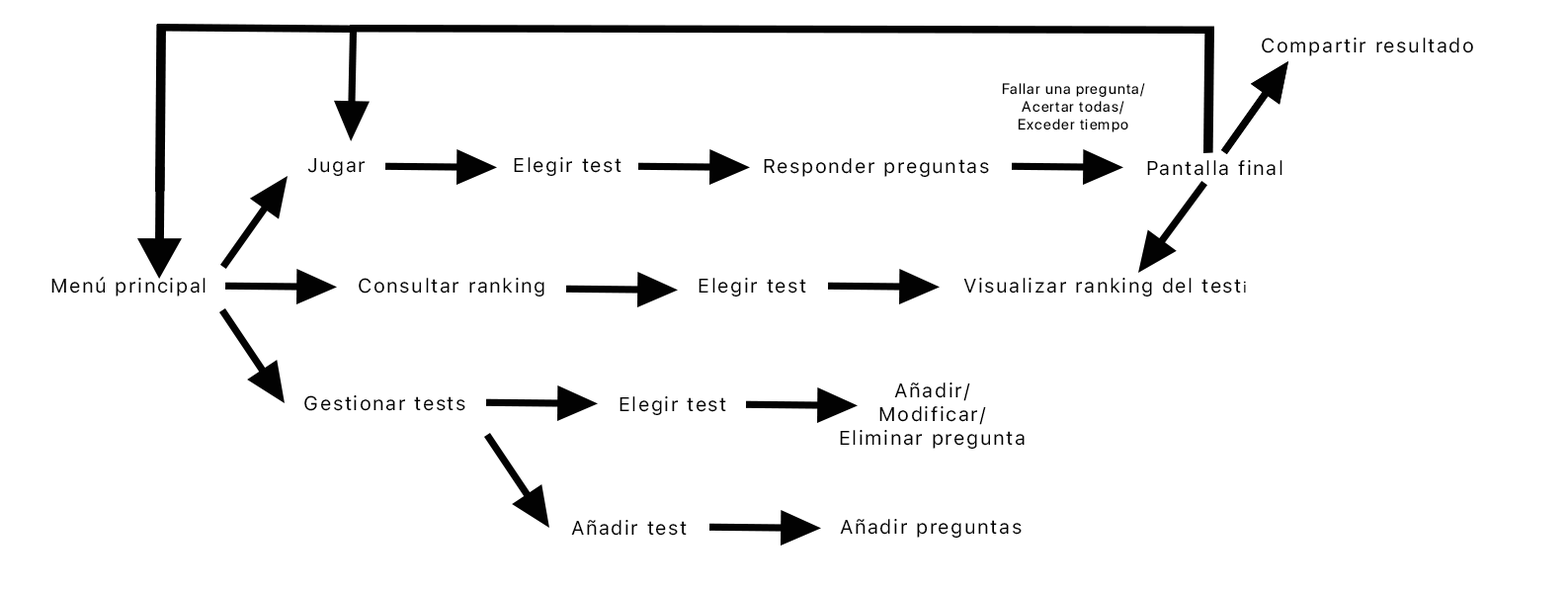
<style>
.page{position:relative;width:1568px;height:593px;background:#ffffff}
.page>*{position:absolute;margin:0}
.t1{font:19.8px "SFText-Regular";letter-spacing:0.075em;color:#000000}
.t2{font:14.8px "SFDisplay-Regular";letter-spacing:0.075em;color:#000000}
.t3{font:14.8px "SFText-Regular";letter-spacing:0.075em;color:#000000}
</style>
<div class="page">
<p class="t1" style="left:1262px;top:38px;width:211px;height:18px">Compartir resultado</p>
<p class="t2" style="left:1002px;top:83px;width:143px;height:49px;text-align:center">Fallar una pregunta/<br>Acertar todas/<br>Exceder tiempo</p>
<p class="t1" style="left:307px;top:158px;width:58px;height:18px">Jugar</p>
<p class="t1" style="left:514px;top:157px;width:107px;height:19px">Elegir test</p>
<p class="t1" style="left:764px;top:158px;width:225px;height:19px">Responder preguntas</p>
<p class="t1" style="left:1147px;top:160px;width:135px;height:16px">Pantalla final</p>
<p class="t1" style="left:51px;top:277px;width:155px;height:19px">Menú principal</p>
<p class="t1" style="left:359px;top:278px;width:185px;height:18px">Consultar ranking</p>
<p class="t1" style="left:699px;top:278px;width:107px;height:18px">Elegir test</p>
<p class="t1" style="left:963px;top:278px;width:283px;height:18px">Visualizar ranking del test<span class="t3">i</span></p>
<p class="t1" style="left:840px;top:382px;width:185px;height:67px;text-align:center">Añadir/<br>Modificar/<br>Eliminar pregunta</p>
<p class="t1" style="left:304px;top:395px;width:161px;height:16px">Gestionar tests</p>
<p class="t1" style="left:619px;top:396px;width:107px;height:19px">Elegir test</p>
<p class="t1" style="left:571px;top:520px;width:116px;height:16px">Añadir test</p>
<p class="t1" style="left:840px;top:519px;width:182px;height:18px">Añadir preguntas</p>
</div>
